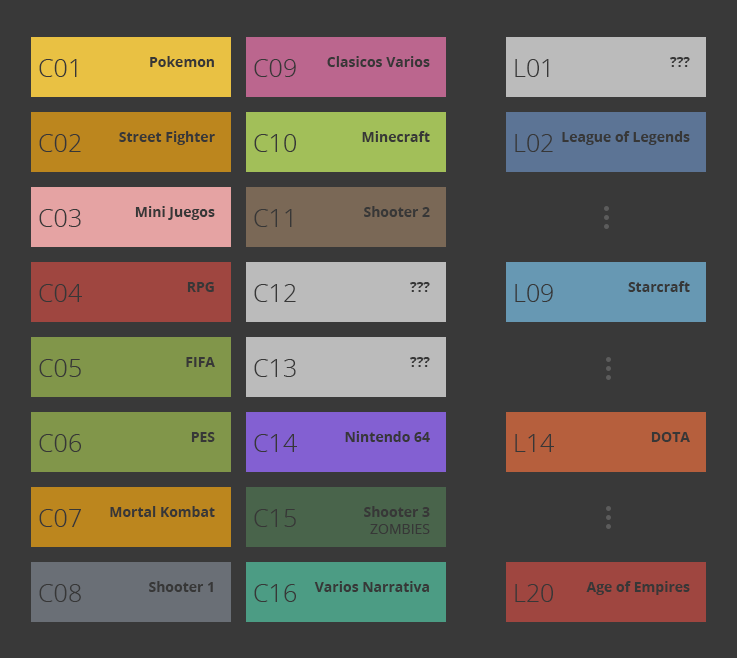
<style>
.page{position:relative;width:737px;height:658px;background:#393939}
.page>*{position:absolute;margin:0}
.t1{font:25px "OpenSans-Light";color:#373737}
.t2{font:14px "OpenSans-Bold";color:#373737}
.t3{font:14px "OpenSans";color:#373737}
</style>
<div class="page">
<p class="t1" style="left:39px;top:59px;width:38px;height:18px">C01</p>
<p class="t2" style="left:150px;top:56px;width:64px;height:11px">Pokemon</p>
<p class="t1" style="left:254px;top:59px;width:42px;height:18px">C09</p>
<p class="t2" style="left:327px;top:56px;width:103px;height:11px">Clasicos Varios</p>
<p class="t1" style="left:515px;top:59px;width:34px;height:18px">L01</p>
<p class="t2" style="left:670px;top:57px;width:20px;height:10px">???</p>
<p class="t1" style="left:39px;top:134px;width:42px;height:18px">C02</p>
<p class="t2" style="left:119px;top:131px;width:96px;height:14px">Street Fighter</p>
<p class="t1" style="left:254px;top:134px;width:42px;height:18px">C10</p>
<p class="t2" style="left:362px;top:131px;width:68px;height:11px">Minecraft</p>
<p class="t1" style="left:515px;top:134px;width:38px;height:18px">L02</p>
<p class="t2" style="left:562px;top:131px;width:128px;height:14px">League of Legends</p>
<p class="t1" style="left:39px;top:209px;width:42px;height:18px">C03</p>
<p class="t2" style="left:135px;top:206px;width:80px;height:14px">Mini Juegos</p>
<p class="t1" style="left:254px;top:209px;width:38px;height:18px">C11</p>
<p class="t2" style="left:364px;top:206px;width:66px;height:11px">Shooter 2</p>
<p class="t2" style="left:628px;top:281px;width:62px;height:11px">Starcraft</p>
<p class="t1" style="left:39px;top:284px;width:43px;height:18px">C04</p>
<p class="t2" style="left:187px;top:282px;width:27px;height:10px">RPG</p>
<p class="t1" style="left:254px;top:284px;width:42px;height:18px">C12</p>
<p class="t2" style="left:410px;top:282px;width:20px;height:10px">???</p>
<p class="t1" style="left:515px;top:284px;width:38px;height:18px">L09</p>
<p class="t1" style="left:39px;top:359px;width:42px;height:18px">C05</p>
<p class="t2" style="left:186px;top:357px;width:29px;height:10px">FIFA</p>
<p class="t1" style="left:254px;top:359px;width:42px;height:18px">C13</p>
<p class="t2" style="left:410px;top:357px;width:20px;height:10px">???</p>
<p class="t1" style="left:39px;top:434px;width:42px;height:18px">C06</p>
<p class="t2" style="left:191px;top:432px;width:24px;height:10px">PES</p>
<p class="t1" style="left:254px;top:434px;width:43px;height:18px">C14</p>
<p class="t2" style="left:345px;top:431px;width:85px;height:11px">Nintendo 64</p>
<p class="t1" style="left:515px;top:434px;width:39px;height:18px">L14</p>
<p class="t2" style="left:651px;top:432px;width:39px;height:10px">DOTA</p>
<p class="t1" style="left:39px;top:509px;width:42px;height:18px">C07</p>
<p class="t2" style="left:110px;top:506px;width:105px;height:11px">Mortal Kombat</p>
<p class="t1" style="left:254px;top:509px;width:42px;height:18px">C15</p>
<p class="t2" style="left:364px;top:506px;width:66px;height:28px;text-align:right">Shooter 3<br><span class="t3">ZOMBIES</span></p>
<p class="t2" style="left:149px;top:581px;width:64px;height:11px">Shooter 1</p>
<p class="t2" style="left:314px;top:581px;width:115px;height:11px">Varios Narrativa</p>
<p class="t2" style="left:586px;top:581px;width:104px;height:14px">Age of Empires</p>
<p class="t1" style="left:39px;top:584px;width:42px;height:18px">C08</p>
<p class="t1" style="left:254px;top:584px;width:42px;height:18px">C16</p>
<p class="t1" style="left:515px;top:584px;width:38px;height:18px">L20</p>
</div>
